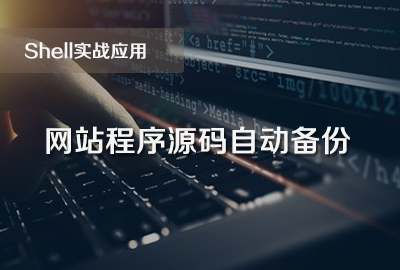
<style>
.page{position:relative;width:400px;height:270px}
.page>*{position:absolute;margin:0}
.t1{font:18px "FZZZHUNHJW--GB1-0";color:#f5f5f5;font-weight:bold}
.t2{font:30px "FZZZHUNHJW--GB1-0";color:#f5f5f5;font-weight:bold}
</style>
<div class="page">
<p class="t1" style="left:25px;top:42px;width:121px;height:17px">Shell实战应用</p>
<p class="t2" style="left:46px;top:126px;width:304px;height:29px">网站程序源码自动备份</p>
</div>
